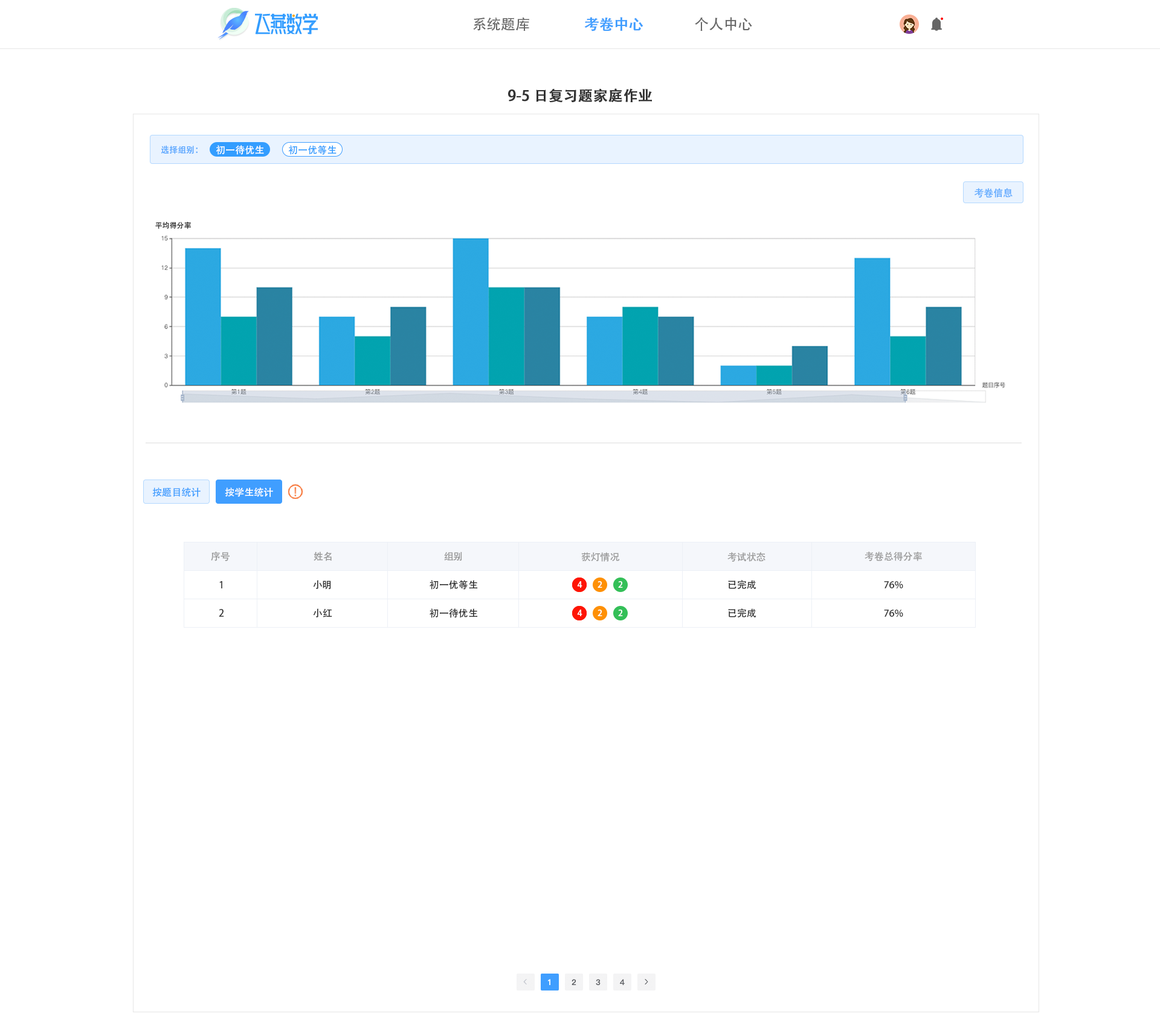
<style>
.page{position:relative;width:1160px;height:1028px;background:#ffffff}
.page>*{position:absolute;margin:0}
.t1{font:14.5px "AdobeHeitiStd-Regular";color:#666666}
.t2{font:14.5px "AdobeHeitiStd-Regular";color:#409eff;font-weight:bold}
.t3{font:14.5px "AdobeHeitiStd-Regular";color:#333333;font-weight:bold}
.t4{font:8.5px "AdobeHeitiStd-Regular";color:#5ba8ff}
.t5{font:9.7px "AdobeHeitiStd-Regular";color:#ffffff}
.t6{font:9.7px "AdobeHeitiStd-Regular";color:#339dff}
.t7{font:9.7px "AdobeHeitiStd-Regular";color:#5ba8ff}
.t8{font:7.3px "AdobeHeitiStd-Regular";color:#333333}
.t9{font:9.7px "AdobeHeitiStd-Regular";color:#409eff}
.t10{font:9.7px "AdobeHeitiStd-Regular";color:#999999}
.t11{font:9.7px "AdobeHeitiStd-Regular";color:#333333}
.t12{font:8.5px "AdobeHeitiStd-Regular";color:#ffffff}
</style>
<div class="page">
<p class="t1" style="left:473px;top:18px;width:56px;height:13px">系统题库</p>
<p class="t2" style="left:584px;top:17px;width:60px;height:14px">考卷中心</p>
<p class="t1" style="left:695px;top:17px;width:58px;height:14px">个人中心</p>
<p class="t3" style="left:508px;top:88px;width:144px;height:14px">9-5日复习题家庭作业</p>
<p class="t4" style="left:161px;top:145px;width:37px;height:9px">选择组别：</p>
<p class="t5" style="left:216px;top:145px;width:48px;height:10px">初一待优生</p>
<p class="t6" style="left:289px;top:145px;width:48px;height:10px">初一优等生</p>
<p class="t7" style="left:974px;top:188px;width:39px;height:10px">考卷信息</p>
<p class="t8" style="left:155px;top:221px;width:36px;height:8px">平均得分率</p>
<p class="t9" style="left:152px;top:487px;width:49px;height:10px">按题目统计</p>
<p class="t5" style="left:225px;top:487px;width:48px;height:10px">按学生统计</p>
<p class="t10" style="left:211px;top:551px;width:19px;height:10px">序号</p>
<p class="t10" style="left:314px;top:551px;width:18px;height:10px">姓名</p>
<p class="t10" style="left:444px;top:551px;width:18px;height:10px">组别</p>
<p class="t10" style="left:581px;top:552px;width:39px;height:10px">获灯情况</p>
<p class="t10" style="left:728px;top:552px;width:38px;height:10px">考试状态</p>
<p class="t10" style="left:865px;top:551px;width:57px;height:10px">考卷总得分率</p>
<p class="t11" style="left:219px;top:581px;width:3px;height:7px">1</p>
<p class="t11" style="left:313px;top:580px;width:18px;height:9px">小明</p>
<p class="t11" style="left:430px;top:580px;width:48px;height:9px">初一优等生</p>
<p class="t12" style="left:577px;top:581px;width:6px;height:7px">4</p>
<p class="t12" style="left:598px;top:581px;width:5px;height:7px">2</p>
<p class="t12" style="left:618px;top:581px;width:5px;height:7px">2</p>
<p class="t11" style="left:728px;top:580px;width:29px;height:9px">已完成</p>
<p class="t11" style="left:884px;top:581px;width:20px;height:8px">76%</p>
<p class="t11" style="left:219px;top:609px;width:5px;height:8px">2</p>
<p class="t11" style="left:313px;top:608px;width:19px;height:9px">小红</p>
<p class="t11" style="left:430px;top:608px;width:48px;height:10px">初一待优生</p>
<p class="t12" style="left:577px;top:609px;width:6px;height:7px">4</p>
<p class="t12" style="left:598px;top:609px;width:5px;height:7px">2</p>
<p class="t12" style="left:618px;top:609px;width:5px;height:7px">2</p>
<p class="t11" style="left:728px;top:608px;width:29px;height:10px">已完成</p>
<p class="t11" style="left:884px;top:609px;width:20px;height:8px">76%</p>
</div>
